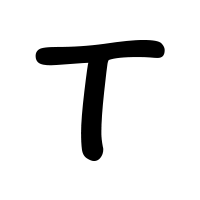
<style>
.page{position:relative;width:200px;height:200px;background:#ffffff}
.page>*{position:absolute;margin:0}
.t1{font:170px "SegoePrint-Bold";color:#000000}
</style>
<div class="page">
<p class="t1" style="left:35px;top:40px;width:130px;height:121px">T</p>
</div>
